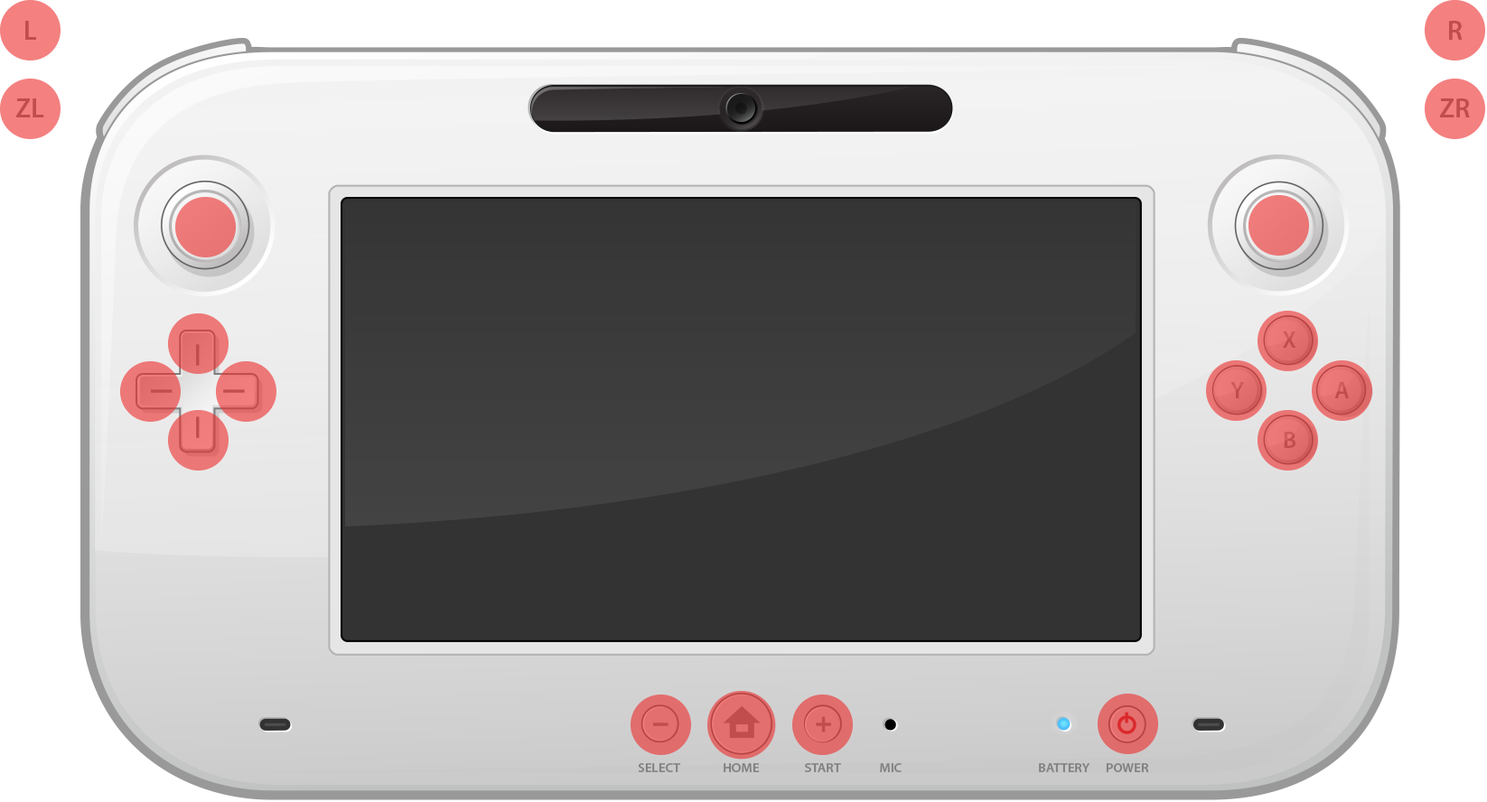
<style>
.page{position:relative;width:1487px;height:802px}
.page>*{position:absolute;margin:0}
.t1{font:27.1px "MyriadPro-Semibold";color:#c14d4d}
.t2{font:23.4px "MyriadPro-Semibold";color:#c14d4d}
.t3{font:23.4px "MyriadPro-Semibold";color:#cb5757}
.t4{font:13.3px "MyriadPro-Semibold";color:#808080}
</style>
<div class="page">
<p class="t1" style="left:25px;top:21px;width:11px;height:19px">L</p>
<p class="t1" style="left:1449px;top:21px;width:13px;height:19px">R</p>
<p class="t1" style="left:16px;top:98px;width:28px;height:19px">ZL</p>
<p class="t1" style="left:1440px;top:98px;width:30px;height:19px">ZR</p>
<p class="t2" style="left:1283px;top:331px;width:13px;height:17px">X</p>
<p class="t3" style="left:1230px;top:382px;width:14px;height:16px">Y</p>
<p class="t2" style="left:1334px;top:382px;width:15px;height:16px">A</p>
<p class="t2" style="left:1283px;top:432px;width:12px;height:16px">B</p>
<p class="t4" style="left:638px;top:763px;width:42px;height:9px">SELECT</p>
<p class="t4" style="left:723px;top:763px;width:37px;height:9px">HOME</p>
<p class="t4" style="left:805px;top:763px;width:36px;height:9px">START</p>
<p class="t4" style="left:880px;top:763px;width:21px;height:9px">MIC</p>
<p class="t4" style="left:1039px;top:763px;width:51px;height:9px">BATTERY</p>
<p class="t4" style="left:1106px;top:763px;width:43px;height:9px">POWER</p>
</div>
